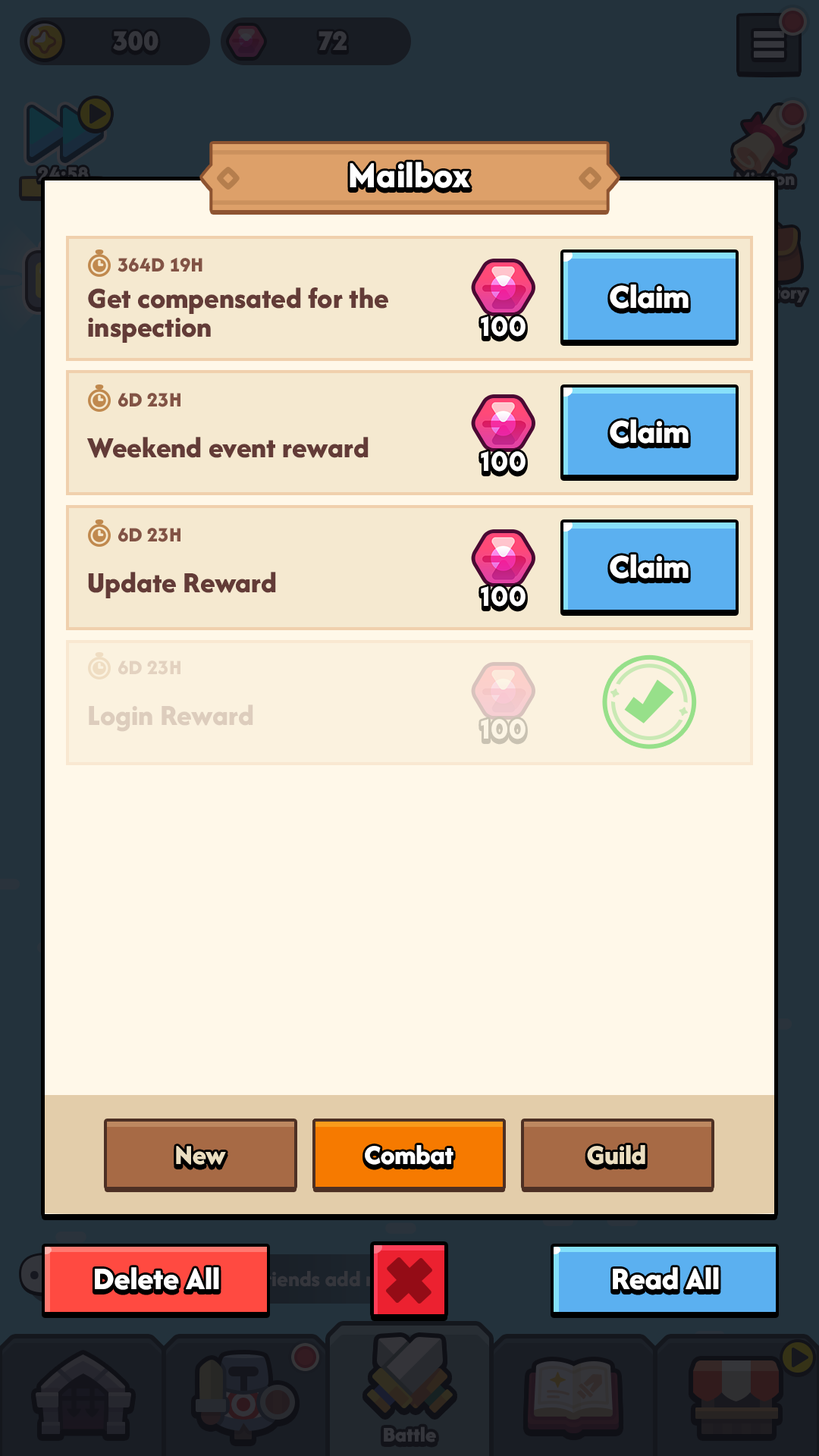
<style>
.page{position:relative;width:819px;height:1456px;background:#fff8e9}
.page>*{position:absolute;margin:0}
.t1{font:37.9px "AfacadFlux-ExtraBold";color:#ffffff}
.t2{font:21.2px "AfacadFlux-ExtraBold";color:#825345}
.t3{font:30.3px/28.8px "AfacadFlux-ExtraBold";color:#633b37}
.t4{font:35px "AfacadFlux-ExtraBold";color:#ffffff}
.t5{font:28.8px "LTAvocado-Bold";color:#ffffff}
.t6{font:30.3px "AfacadFlux-ExtraBold";color:#633b37}
.t7{font:21.2px "AfacadFlux-ExtraBold";color:#e3d2c0}
.t8{font:30.3px "AfacadFlux-ExtraBold";color:#ddcdbd}
.t9{font:28.8px "LTAvocado-Bold";color:#fcf5e5}
.t10{font:28.4px "AfacadFlux-ExtraBold";color:#ebdec0}
.t11{font:28.4px "AfacadFlux-ExtraBold";color:#ffffff}
.t12{font:28.4px "AfacadFlux-ExtraBold"}
.t13{font:32.8px "AfacadFlux-ExtraBold";color:#ffffff}
</style>
<div class="page">
<p class="t1" style="left:350px;top:162px;width:120px;height:26px">Mailbox</p>
<p class="t2" style="left:118px;top:258px;width:84px;height:14px">364D 19H</p>
<p class="t3" style="left:88px;top:287px;width:300px;height:56px">Get compensated for the<br>inspection</p>
<p class="t4" style="left:610px;top:284px;width:79px;height:25px">Claim</p>
<p class="t5" style="left:481px;top:316px;width:45px;height:21px">100</p>
<p class="t2" style="left:118px;top:393px;width:62px;height:14px">6D 23H</p>
<p class="t4" style="left:610px;top:419px;width:79px;height:25px">Claim</p>
<p class="t6" style="left:86px;top:437px;width:283px;height:21px">Weekend event reward</p>
<p class="t5" style="left:481px;top:451px;width:45px;height:21px">100</p>
<p class="t2" style="left:118px;top:528px;width:62px;height:14px">6D 23H</p>
<p class="t4" style="left:610px;top:554px;width:79px;height:25px">Claim</p>
<p class="t6" style="left:88px;top:572px;width:188px;height:26px">Update Reward</p>
<p class="t5" style="left:481px;top:586px;width:45px;height:21px">100</p>
<p class="t7" style="left:118px;top:660px;width:62px;height:15px">6D 23H</p>
<p class="t8" style="left:89px;top:704px;width:164px;height:28px">Login Reward</p>
<p class="t9" style="left:481px;top:719px;width:45px;height:20px">100</p>
<p class="t10" style="left:176px;top:1146px;width:50px;height:19px">New</p>
<p class="t11" style="left:365px;top:1145px;width:88px;height:20px">Combat</p>
<p class="t12" style="left:366px;top:1145px;width:84px;height:25px">Weekly</p>
<p class="t10" style="left:587px;top:1145px;width:58px;height:20px">Guild</p>
<p class="t13" style="left:95px;top:1267px;width:124px;height:23px">Delete All</p>
<p class="t13" style="left:613px;top:1267px;width:106px;height:23px">Read All</p>
</div>
